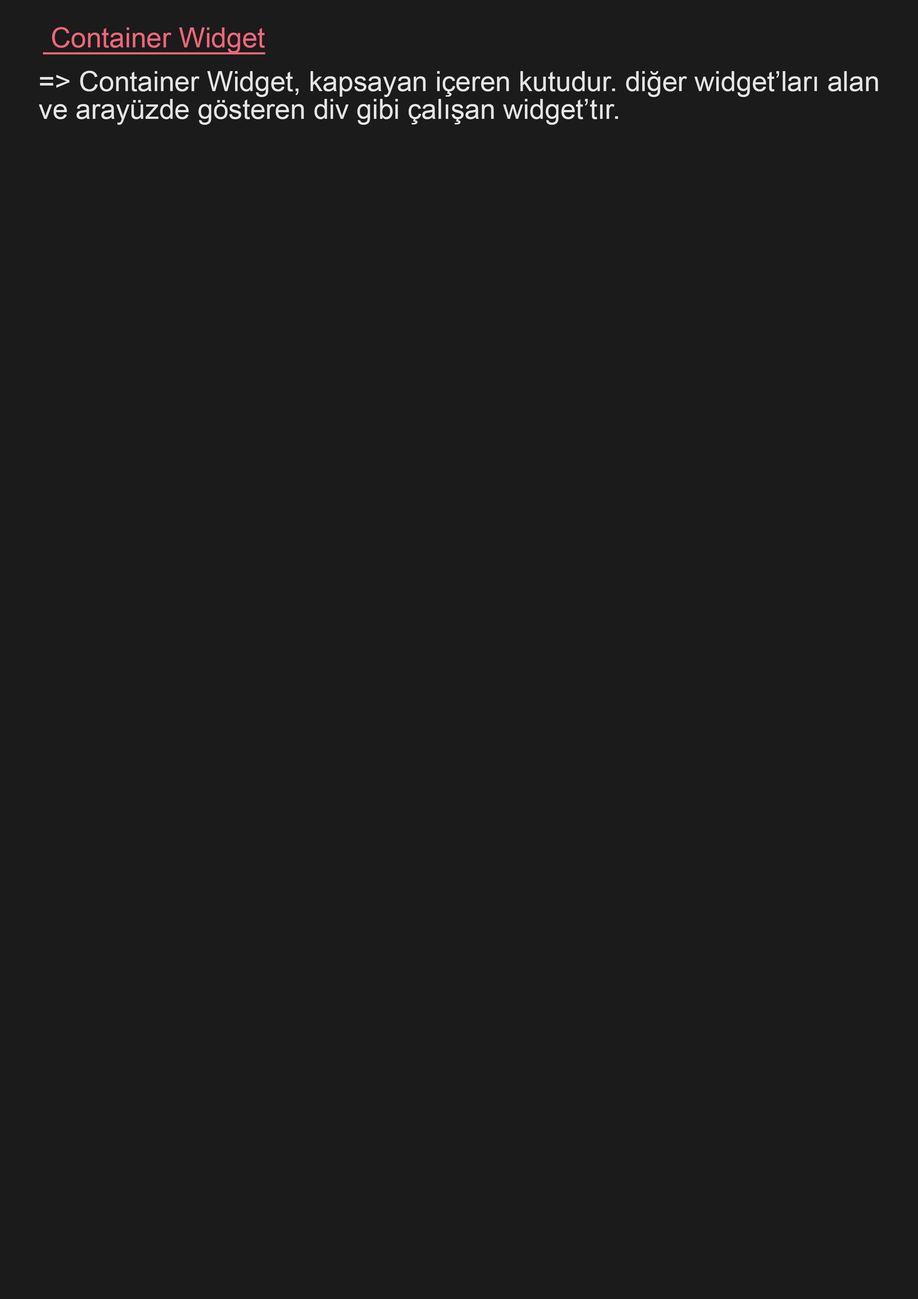
<style>
.page{position:relative;width:918px;height:1299px;background:#1b1b1b}
.page>*{position:absolute;margin:0}
.t1{font:27.8px "ArialMT";color:#ec677a;text-decoration:underline}
.t2{font:27.8px/27.8px "ArialMT";color:#e5e5e5}
</style>
<div class="page">
<p class="t1" style="left:43px;top:27px;width:222px;height:27px">Container Widget</p>
<p class="t2" style="left:39px;top:71px;width:839px;height:54px">=&gt; Container Widget, kapsayan içeren kutudur. diğer widget’ları alan<br>ve arayüzde gösteren div gibi çalışan widget’tır.</p>
</div>
